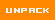
<style>
.page{position:relative;width:55px;height:20px;background:#ff8800}
.page>*{position:absolute;margin:0}
.t1{font:14px "AcknowledgeTT-BRK-";color:#f1f1f1}
</style>
<div class="page">
<p class="t1" style="left:6px;top:8px;width:43px;height:5px">UNPACK</p>
</div>
